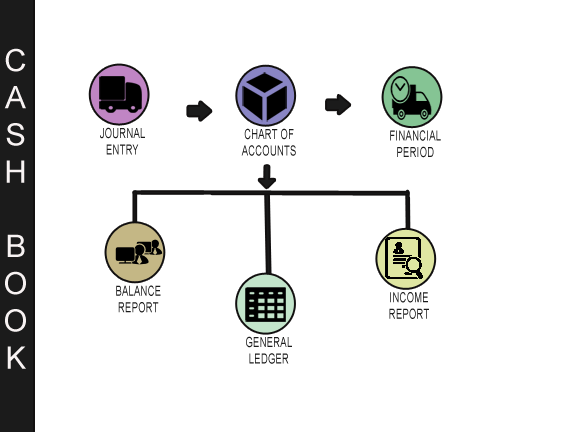
<style>
.page{position:relative;width:576px;height:432px;background:#ffffff}
.page>*{position:absolute;margin:0}
.t1{font:31px "ArialMT";letter-spacing:0.05em;color:#f8f3f3}
.t2{font:13.8px "ArialMT";letter-spacing:0.05em;color:#1b1b1b;scale:0.66 1}
</style>
<div class="page">
<p class="t1" style="left:4px;top:48px;width:22px;height:321px;text-align:center">CASH <br><br>BOOK</p>
<p class="t2" style="left:100px;top:127px;width:45px;height:28px;text-align:center">JOURNAL<br>ENTRY</p>
<p class="t2" style="left:241px;top:128px;width:55px;height:28px;text-align:center">CHART OF<br>ACCOUNTS</p>
<p class="t2" style="left:390px;top:130px;width:51px;height:28px;text-align:center">FINANCIAL<br>PERIOD</p>
<p class="t2" style="left:116px;top:285px;width:45px;height:28px;text-align:center">BALANCE<br>REPORT</p>
<p class="t2" style="left:389px;top:292px;width:40px;height:27px;text-align:center">INCOME<br>REPORT</p>
<p class="t2" style="left:246px;top:336px;width:46px;height:28px;text-align:center">GENERAL<br>LEDGER</p>
</div>
